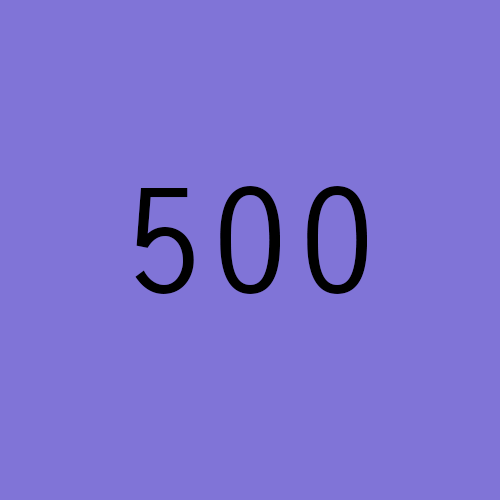
<style>
.page{position:relative;width:500px;height:500px;background:#8074d7}
.page>*{position:absolute;margin:0}
.t1{font:144px "LetterGothicStd-Bold";color:#000000}
</style>
<div class="page">
<p class="t1" style="left:135px;top:186px;width:232px;height:108px">500</p>
</div>
